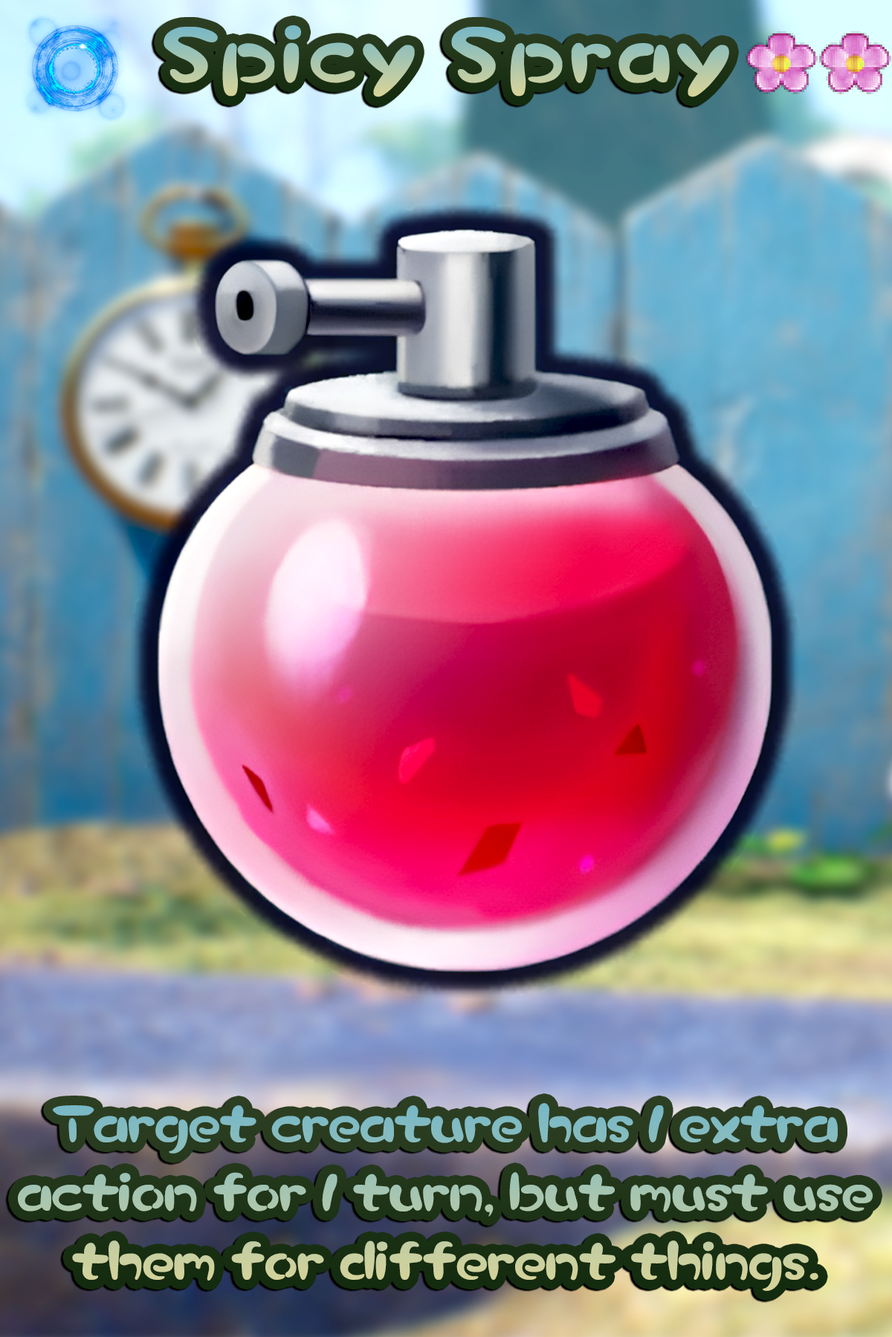
<style>
.page{position:relative;width:892px;height:1337px}
.page>*{position:absolute;margin:0}
.t1{font:136.7px "Pikmin";letter-spacing:0.08em}
.t2{font:90.6px/68.6px "Pikmin"}
</style>
<div class="page">
<p class="t1" style="left:163px;top:25px;width:566px;height:72px">Spicy Spray</p>
<p class="t2" style="left:18px;top:1103px;width:854px;height:188px;text-align:center">Target creature has 1 extra action for 1 turn, but must use them for different things.</p>
</div>
